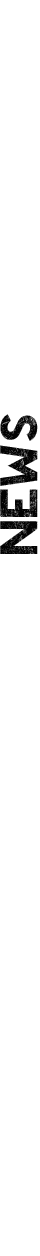
<style>
.page{position:relative;width:40px;height:1256px;background:#ffffff}
.page>*{position:absolute;margin:0}
.t1{font:50px "REVOLUTIONII";color:#030303;text-transform:uppercase;scale:1.04 1}
</style>
<div class="page">
<p class="t1" style="left:0px;top:414px;width:38px;height:140px;rotate:-90deg">NEWS</p>
</div>
